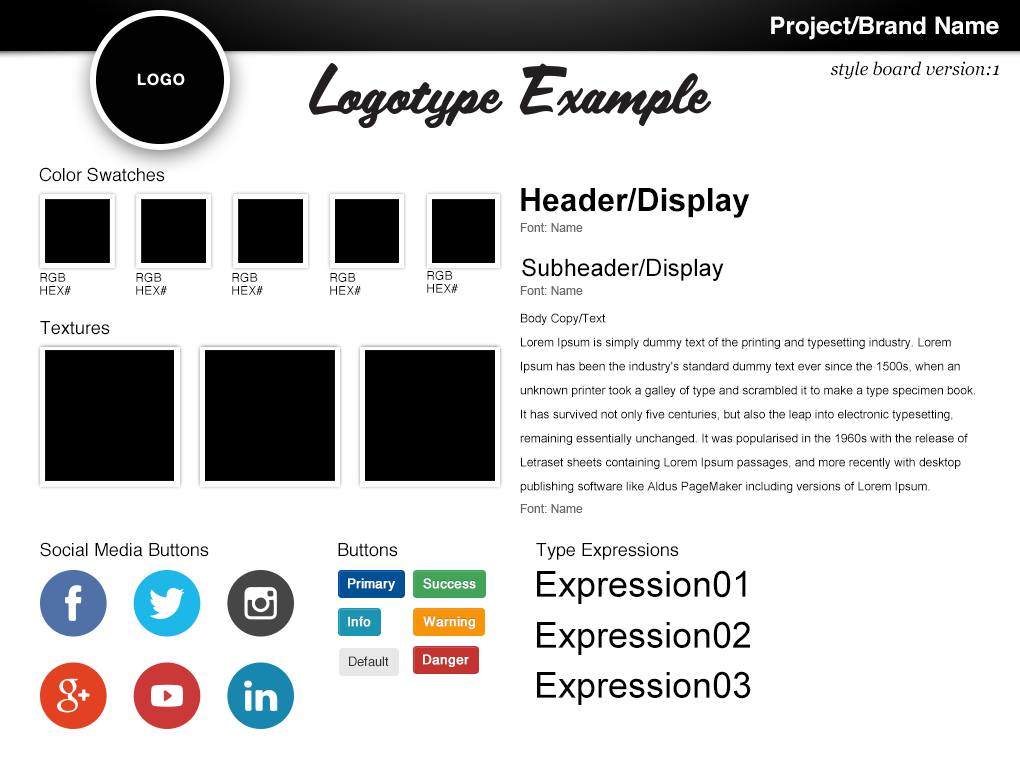
<style>
.page{position:relative;width:1020px;height:760px;background:#ffffff}
.page>*{position:absolute;margin:0}
.t1{font:24px "Helvetica-Bold";color:#ffffff}
.t2{font:18px "Georgia-Italic";color:#000000}
.t3{font:18px "Helvetica";color:#000000}
.t4{font:32px "Arial-BoldMT";color:#000000}
.t5{font:12px "ArialMT";color:#666666}
.t6{font:12px/13px "Helvetica";color:#000000}
.t7{font:24px "ArialMT";color:#000000}
.t8{font:12px/24px "ArialMT";color:#000000}
.t9{font:13px "Helvetica";color:#ffffff;font-weight:bold}
.t10{font:36px "ArialMT";color:#000000}
.t11{font:13px "Helvetica";color:#333333}
</style>
<div class="page">
<p class="t1" style="left:771px;top:16px;width:228px;height:24px">Project/Brand Name</p>
<p class="t2" style="left:830px;top:61px;width:169px;height:18px">style board version:1</p>
<p class="t3" style="left:39px;top:167px;width:126px;height:15px">Color Swatches</p>
<p class="t4" style="left:521px;top:188px;width:229px;height:30px">Header/Display</p>
<p class="t5" style="left:520px;top:223px;width:63px;height:9px">Font: Name</p>
<p class="t6" style="left:427px;top:270px;width:31px;height:23px">RGB<br>HEX#</p>
<p class="t7" style="left:522px;top:258px;width:202px;height:23px">Subheader/Display</p>
<p class="t6" style="left:40px;top:272px;width:31px;height:23px">RGB<br>HEX#</p>
<p class="t6" style="left:136px;top:272px;width:31px;height:23px">RGB<br>HEX#</p>
<p class="t6" style="left:232px;top:272px;width:31px;height:23px">RGB<br>HEX#</p>
<p class="t6" style="left:330px;top:272px;width:31px;height:23px">RGB<br>HEX#</p>
<p class="t5" style="left:520px;top:286px;width:63px;height:9px">Font: Name</p>
<p class="t8" style="left:520px;top:313px;width:455px;height:180px">Body Copy/Text<br>Lorem Ipsum is simply dummy text of the printing and typesetting industry. Lorem Ipsum has been the industry's standard dummy text ever since the 1500s, when an unknown printer took a galley of type and scrambled it to make a type specimen book. It has survived not only five centuries, but also the leap into electronic typesetting, remaining essentially unchanged. It was popularised in the 1960s with the release of Letraset sheets containing Lorem Ipsum passages, and more recently with desktop publishing software like Aldus PageMaker including versions of Lorem Ipsum.</p>
<p class="t3" style="left:40px;top:321px;width:70px;height:14px">Textures</p>
<p class="t5" style="left:520px;top:504px;width:63px;height:9px">Font: Name</p>
<p class="t3" style="left:40px;top:542px;width:169px;height:15px">Social Media Buttons</p>
<p class="t3" style="left:338px;top:543px;width:60px;height:14px">Buttons</p>
<p class="t3" style="left:536px;top:543px;width:143px;height:17px">Type Expressions</p>
<p class="t9" style="left:348px;top:578px;width:47px;height:13px">Primary</p>
<p class="t9" style="left:423px;top:578px;width:53px;height:11px">Success</p>
<p class="t10" style="left:537px;top:570px;width:209px;height:34px">Expression01</p>
<p class="t9" style="left:348px;top:616px;width:23px;height:11px">Info</p>
<p class="t9" style="left:423px;top:616px;width:52px;height:13px">Warning</p>
<p class="t10" style="left:537px;top:621px;width:213px;height:34px">Expression02</p>
<p class="t9" style="left:423px;top:654px;width:46px;height:13px">Danger</p>
<p class="t11" style="left:349px;top:656px;width:40px;height:11px">Default</p>
<p class="t10" style="left:537px;top:671px;width:214px;height:34px">Expression03</p>
</div>
